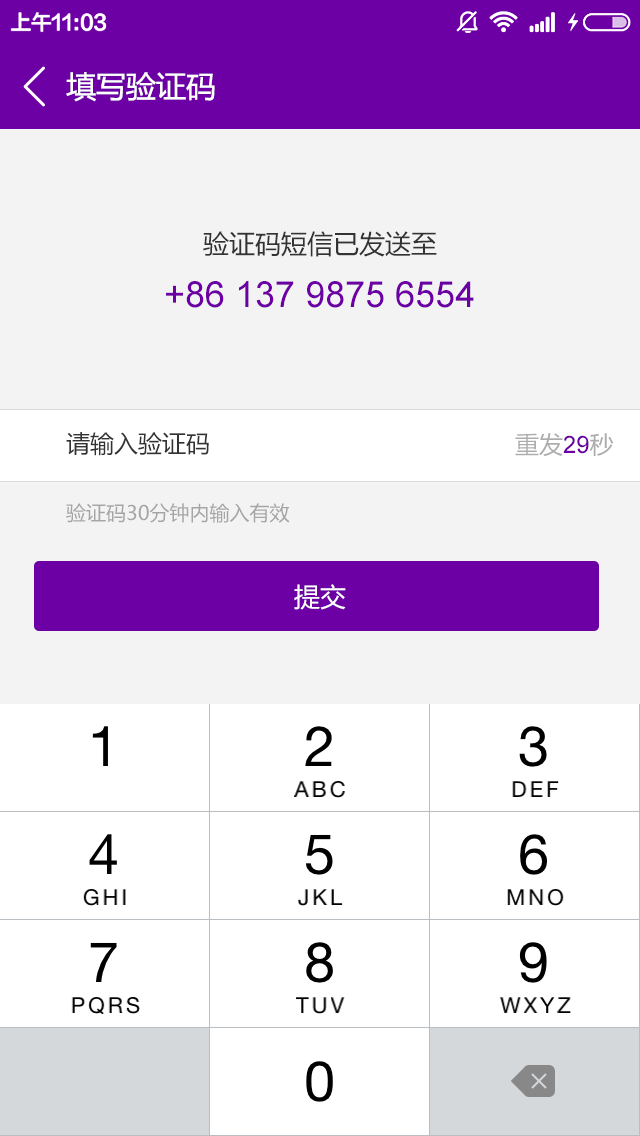
<style>
.page{position:relative;width:640px;height:1136px;background:#f3f3f3}
.page>*{position:absolute;margin:0}
.t1{font:30px "MicrosoftYaHei";color:#ffffff}
.t2{font:26px "MicrosoftYaHei";color:#333333}
.t3{font:36px "ArialMT";color:#6d00a5}
.t4{font:24px "MicrosoftYaHei";color:#333333}
.t5{font:24px "MicrosoftYaHei";color:#acacac}
.t6{font:24px "ArialMT";color:#6d00a5}
.t7{font:20px "MicrosoftYaHei";color:#a5a5a5}
.t8{font:26px "MicrosoftYaHei";color:#ffffff}
</style>
<div class="page">
<p class="t1" style="left:66px;top:72px;width:149px;height:30px">填写验证码</p>
<p class="t2" style="left:203px;top:231px;width:234px;height:26px">验证码短信已发送至</p>
<p class="t3" style="left:166px;top:281px;width:308px;height:27px">+86 137 9875 6554</p>
<p class="t4" style="left:66px;top:432px;width:143px;height:24px">请输入验证码</p>
<p class="t5" style="left:515px;top:433px;width:99px;height:24px">重发<span class="t6">29</span>秒</p>
<p class="t7" style="left:66px;top:503px;width:224px;height:20px">验证码30分钟内输入有效</p>
<p class="t8" style="left:294px;top:584px;width:52px;height:26px">提交</p>
</div>
